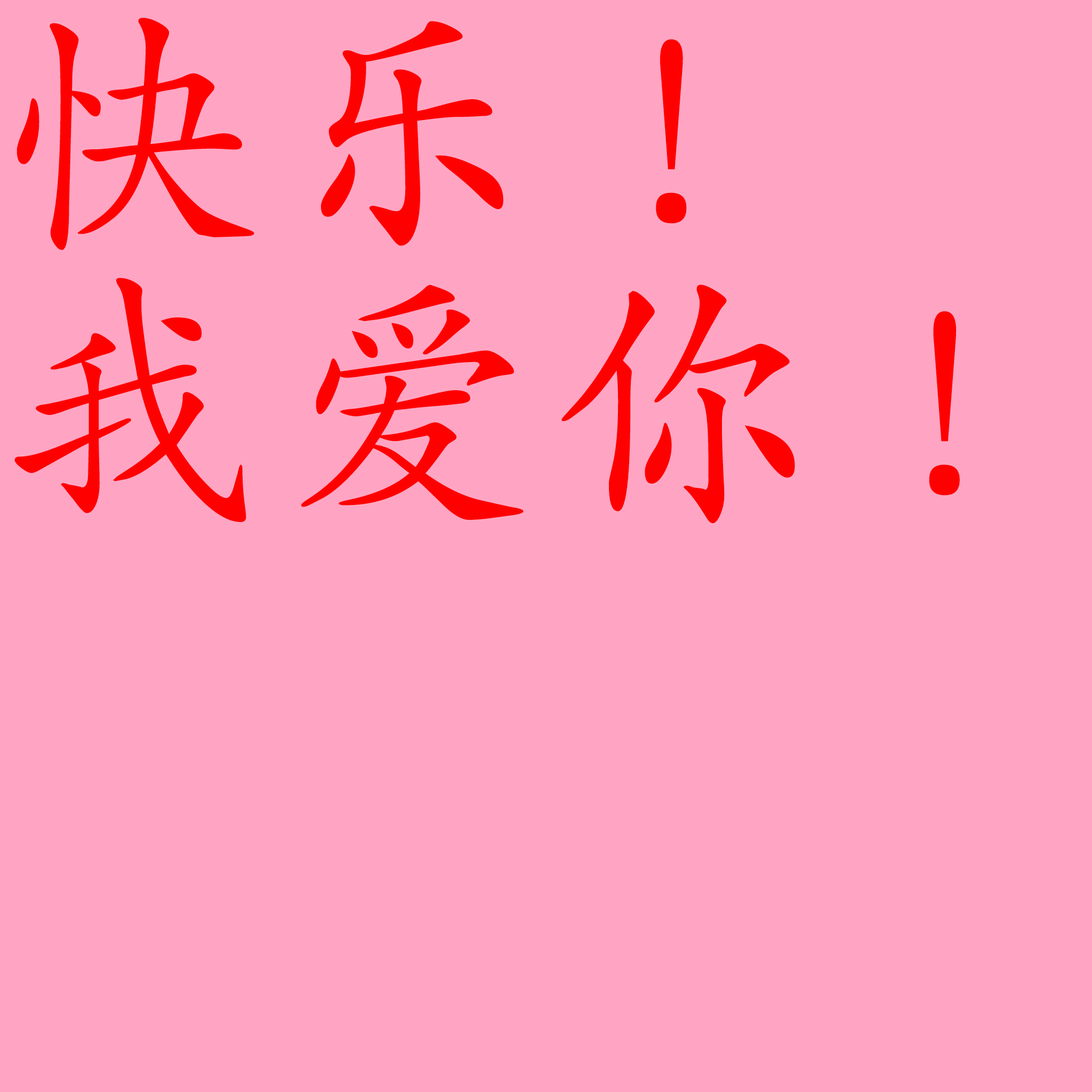
<style>
.page{position:relative;width:1092px;height:1092px;background:#ffa5c3}
.page>*{position:absolute;margin:0}
.t1{font:266.6px/271.9px "SIL-Kai-Reg-Jian";letter-spacing:0.025em;color:#ff0000}
</style>
<div class="page">
<p class="t1" style="left:14px;top:18px;width:946px;height:506px">快乐！<br>我爱你！</p>
</div>
